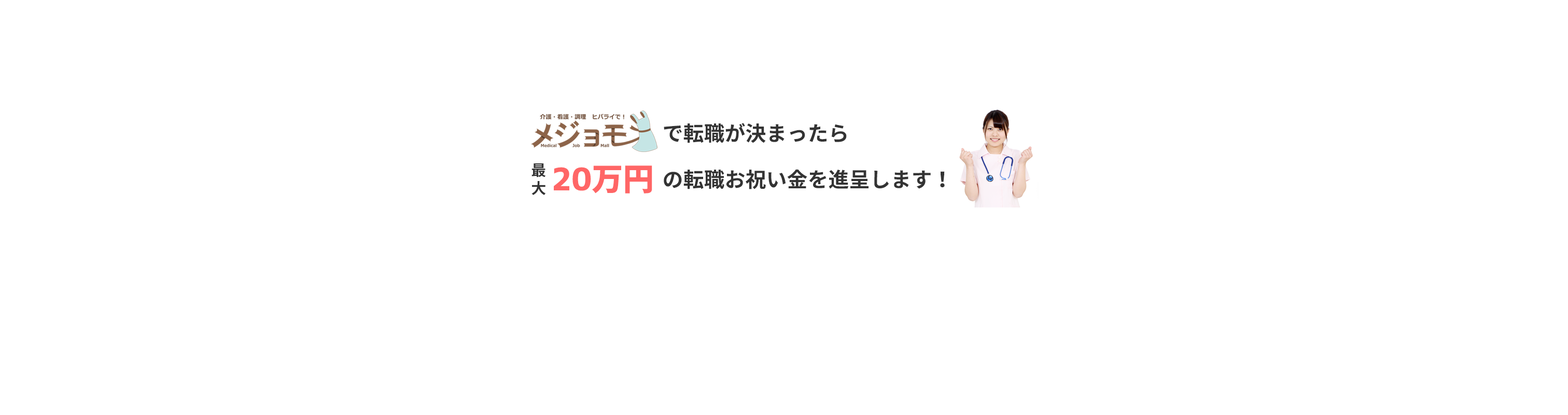
<style>
.page{position:relative;width:1568px;height:415px;background:#ffffff}
.page>*{position:absolute;margin:0}
.t1{font:20.7px "Nasu-Bold";color:#333333}
.t2{font:15px "Nasu-Bold";color:#333333}
.t3{font:31.1px "Corporate-Logo-Bold";color:#ff6666}
</style>
<div class="page">
<p class="t1" style="left:664px;top:123px;width:183px;height:20px">で転職が決まったら</p>
<p class="t2" style="left:531px;top:163px;width:15px;height:32px">最<br>大</p>
<p class="t3" style="left:554px;top:165px;width:98px;height:28px">20万円</p>
<p class="t1" style="left:664px;top:169px;width:281px;height:20px">の転職お祝い金を進呈します！</p>
</div>
